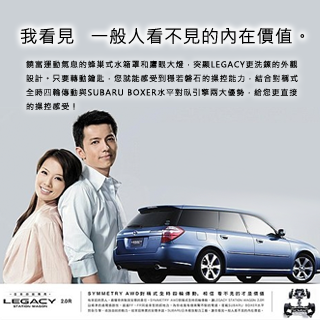
<style>
.page{position:relative;width:320px;height:320px;background:#cbd0d5}
.page>*{position:absolute;margin:0}
.t1{font:17.7px "MicrosoftJhengHeiRegular";letter-spacing:0.04em;color:#000000}
.t2{font:8px "MicrosoftJhengHeiRegular";letter-spacing:0.1em;color:#000000}
</style>
<div class="page">
<p class="t1" style="left:20px;top:28px;width:285px;height:16px">我看見   一般人看不見的內在價值。</p>
<p class="t2" style="left:26px;top:60px;width:272px;height:50px">饒富運動氣息的蜂巢式水箱罩和鷹眼大燈，突顯LEGACY更洗鍊的外觀設計。只要轉動鑰匙，您就能感受到穩若磐石的操控能力，結合對稱式全時四輪傳動與SUBARU BOXER水平對臥引擎兩大優勢，給您更直接的操控感受！</p>
</div>
